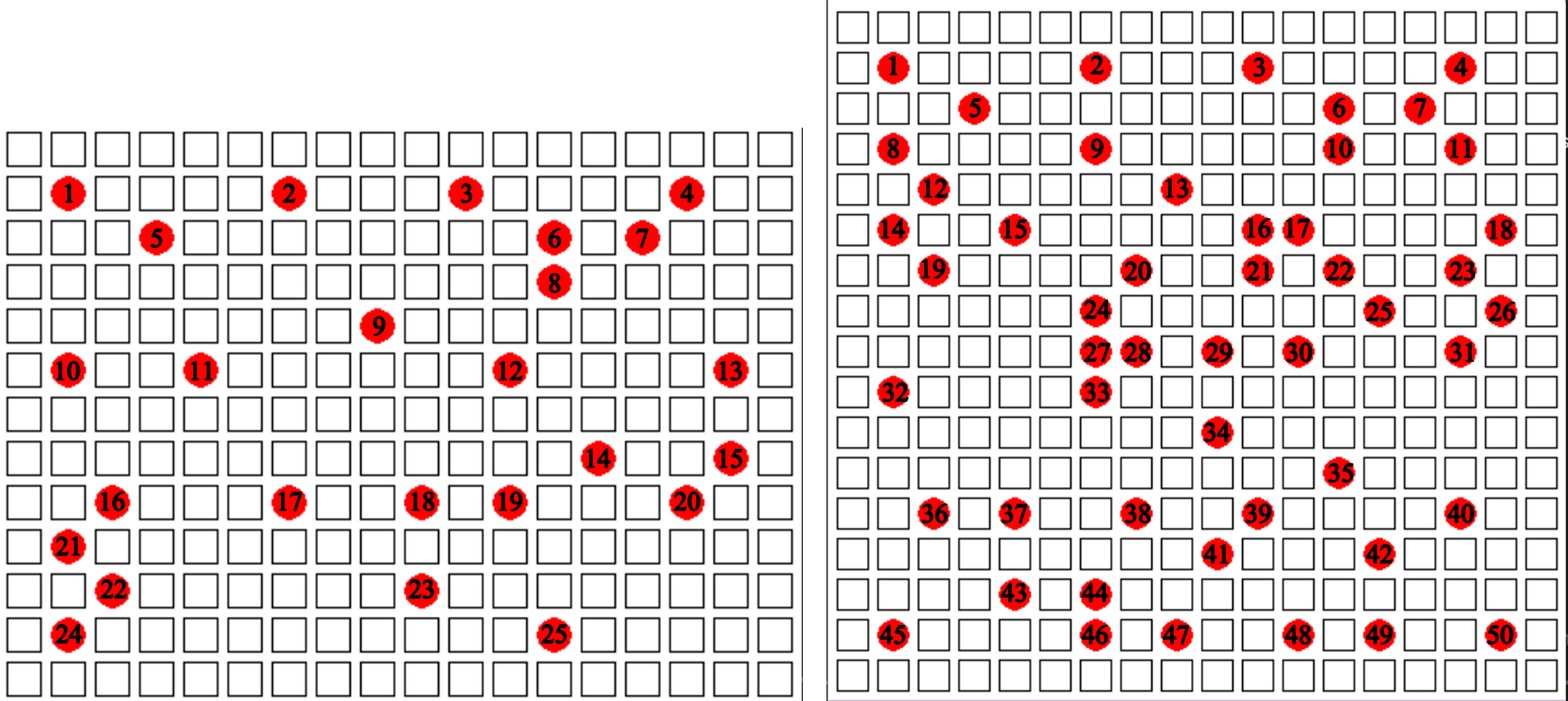
<style>
.page{position:relative;width:1568px;height:701px;background:#ffffff}
.page>*{position:absolute;margin:0}
.t1{font:26.7px "DoulosSIL";color:#000000}
</style>
<div class="page">
<p class="t1" style="left:889px;top:56px;width:8px;height:19px">1</p>
<p class="t1" style="left:1091px;top:56px;width:12px;height:18px">2</p>
<p class="t1" style="left:1254px;top:58px;width:11px;height:18px">3</p>
<p class="t1" style="left:1455px;top:58px;width:12px;height:18px">4</p>
<p class="t1" style="left:970px;top:98px;width:10px;height:19px">5</p>
<p class="t1" style="left:1333px;top:98px;width:12px;height:19px">6</p>
<p class="t1" style="left:1414px;top:98px;width:12px;height:19px">7</p>
<p class="t1" style="left:888px;top:139px;width:11px;height:19px">8</p>
<p class="t1" style="left:1091px;top:139px;width:12px;height:19px">9</p>
<p class="t1" style="left:1328px;top:139px;width:24px;height:19px">10</p>
<p class="t1" style="left:1450px;top:139px;width:22px;height:19px">11</p>
<p class="t1" style="left:65px;top:184px;width:8px;height:19px">1</p>
<p class="t1" style="left:283px;top:184px;width:12px;height:19px">2</p>
<p class="t1" style="left:461px;top:184px;width:11px;height:19px">3</p>
<p class="t1" style="left:681px;top:184px;width:12px;height:19px">4</p>
<p class="t1" style="left:924px;top:179px;width:24px;height:19px">12</p>
<p class="t1" style="left:1166px;top:179px;width:22px;height:19px">13</p>
<p class="t1" style="left:881px;top:220px;width:24px;height:18px">14</p>
<p class="t1" style="left:1004px;top:220px;width:23px;height:18px">15</p>
<p class="t1" style="left:1247px;top:219px;width:24px;height:18px">16</p>
<p class="t1" style="left:1286px;top:219px;width:23px;height:18px">17</p>
<p class="t1" style="left:1490px;top:220px;width:22px;height:19px">18</p>
<p class="t1" style="left:151px;top:229px;width:11px;height:18px">5</p>
<p class="t1" style="left:549px;top:229px;width:11px;height:18px">6</p>
<p class="t1" style="left:636px;top:229px;width:12px;height:18px">7</p>
<p class="t1" style="left:922px;top:260px;width:23px;height:18px">19</p>
<p class="t1" style="left:1124px;top:262px;width:27px;height:18px">20</p>
<p class="t1" style="left:1246px;top:262px;width:25px;height:18px">21</p>
<p class="t1" style="left:1326px;top:262px;width:27px;height:18px">22</p>
<p class="t1" style="left:1450px;top:262px;width:25px;height:18px">23</p>
<p class="t1" style="left:549px;top:274px;width:11px;height:18px">8</p>
<p class="t1" style="left:1084px;top:300px;width:26px;height:19px">24</p>
<p class="t1" style="left:1366px;top:302px;width:26px;height:19px">25</p>
<p class="t1" style="left:1489px;top:302px;width:26px;height:19px">26</p>
<p class="t1" style="left:373px;top:317px;width:12px;height:18px">9</p>
<p class="t1" style="left:1084px;top:343px;width:26px;height:19px">27</p>
<p class="t1" style="left:1124px;top:343px;width:26px;height:19px">28</p>
<p class="t1" style="left:1206px;top:343px;width:25px;height:19px">29</p>
<p class="t1" style="left:1286px;top:343px;width:26px;height:19px">30</p>
<p class="t1" style="left:1450px;top:343px;width:24px;height:19px">31</p>
<p class="t1" style="left:56px;top:362px;width:24px;height:18px">10</p>
<p class="t1" style="left:191px;top:362px;width:21px;height:18px">11</p>
<p class="t1" style="left:499px;top:362px;width:24px;height:18px">12</p>
<p class="t1" style="left:719px;top:362px;width:23px;height:18px">13</p>
<p class="t1" style="left:883px;top:383px;width:25px;height:18px">32</p>
<p class="t1" style="left:1085px;top:383px;width:24px;height:18px">33</p>
<p class="t1" style="left:1204px;top:423px;width:26px;height:18px">34</p>
<p class="t1" style="left:587px;top:449px;width:23px;height:19px">14</p>
<p class="t1" style="left:719px;top:449px;width:23px;height:19px">15</p>
<p class="t1" style="left:1328px;top:463px;width:25px;height:19px">35</p>
<p class="t1" style="left:101px;top:492px;width:24px;height:19px">16</p>
<p class="t1" style="left:279px;top:492px;width:23px;height:19px">17</p>
<p class="t1" style="left:411px;top:492px;width:23px;height:19px">18</p>
<p class="t1" style="left:499px;top:492px;width:23px;height:19px">19</p>
<p class="t1" style="left:674px;top:492px;width:26px;height:19px">20</p>
<p class="t1" style="left:922px;top:504px;width:26px;height:19px">36</p>
<p class="t1" style="left:1002px;top:504px;width:25px;height:19px">37</p>
<p class="t1" style="left:1125px;top:504px;width:25px;height:19px">38</p>
<p class="t1" style="left:1246px;top:504px;width:25px;height:19px">39</p>
<p class="t1" style="left:1447px;top:504px;width:27px;height:19px">40</p>
<p class="t1" style="left:56px;top:537px;width:24px;height:18px">21</p>
<p class="t1" style="left:1204px;top:545px;width:24px;height:18px">41</p>
<p class="t1" style="left:1366px;top:545px;width:27px;height:18px">42</p>
<p class="t1" style="left:101px;top:580px;width:26px;height:18px">22</p>
<p class="t1" style="left:409px;top:580px;width:25px;height:18px">23</p>
<p class="t1" style="left:1001px;top:583px;width:25px;height:19px">43</p>
<p class="t1" style="left:1082px;top:583px;width:26px;height:19px">44</p>
<p class="t1" style="left:56px;top:625px;width:26px;height:18px">24</p>
<p class="t1" style="left:541px;top:625px;width:26px;height:18px">25</p>
<p class="t1" style="left:880px;top:625px;width:26px;height:19px">45</p>
<p class="t1" style="left:1082px;top:625px;width:26px;height:19px">46</p>
<p class="t1" style="left:1163px;top:625px;width:26px;height:19px">47</p>
<p class="t1" style="left:1285px;top:625px;width:26px;height:19px">48</p>
<p class="t1" style="left:1366px;top:625px;width:26px;height:19px">49</p>
<p class="t1" style="left:1487px;top:625px;width:26px;height:19px">50</p>
</div>
